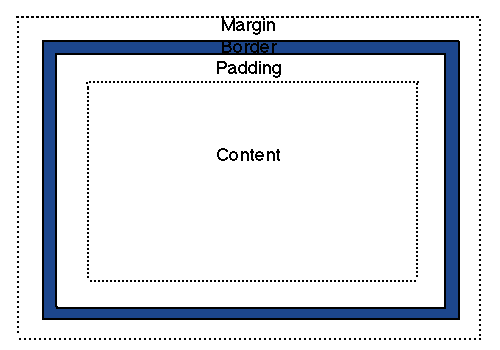
<style>
.page{position:relative;width:500px;height:350px;background:#ffffff}
.page>*{position:absolute;margin:0}
.t1{font:18px "Helvetica";color:#000000}
</style>
<div class="page">
<p class="t1" style="left:217px;top:18px;width:64px;height:143px;text-align:center">Margin<br>Border<br>Padding<br><br><br><br>Content</p>
</div>
